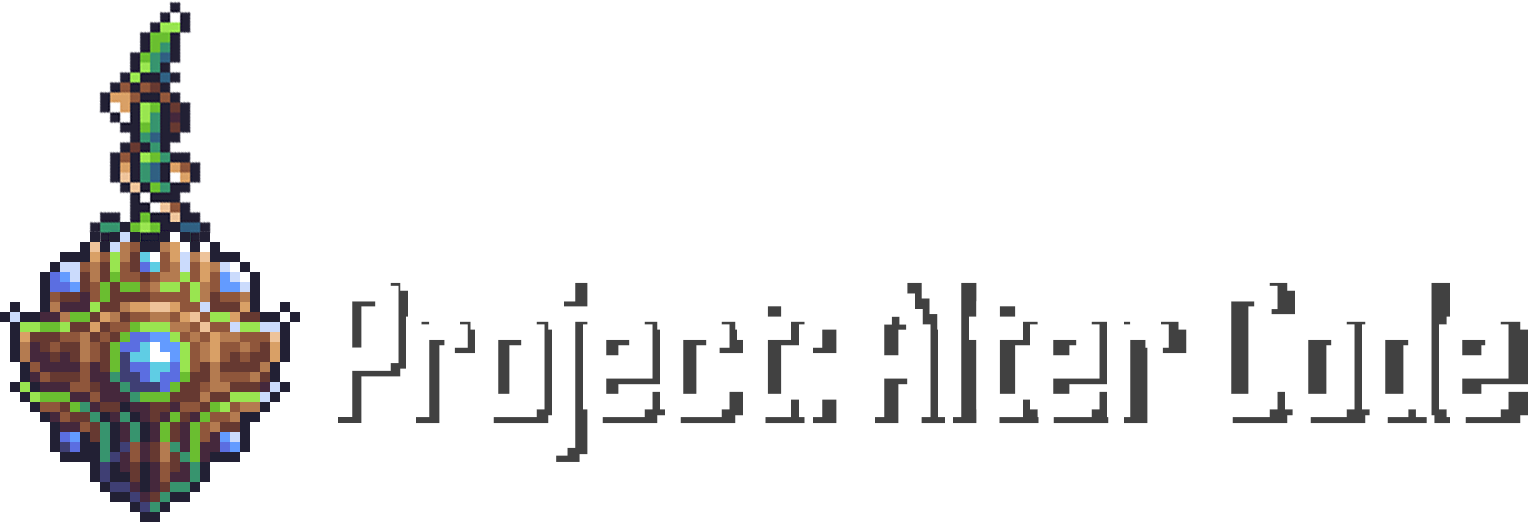
<style>
.page{position:relative;width:1528px;height:522px;background:#ffffff}
.page>*{position:absolute;margin:0}
.t1{font:178.9px "Hannover-Messe-Sans"}
</style>
<div class="page">
<p class="t1" style="left:338px;top:282px;width:1190px;height:180px">Project: Alter Code</p>
</div>
